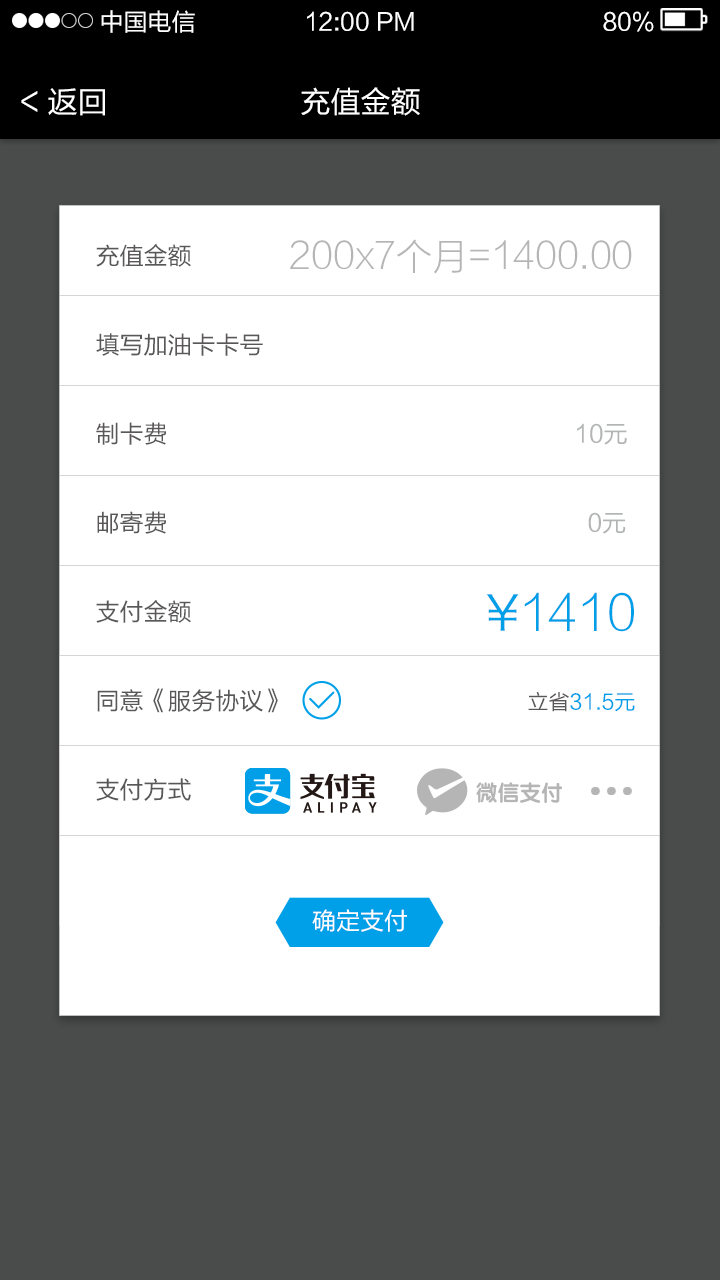
<style>
.page{position:relative;width:720px;height:1280px;background:#ffffff}
.page>*{position:absolute;margin:0}
.t1{font:24px "FZLTHK--GBK1-0";color:#ffffff}
.t2{font:30px "FZLTHK--GBK1-0";color:#ffffff}
.t3{font:24px/89px "FZLTHK--GBK1-0";color:#595757}
.t4{font:24px/89px "FZLTHK--GBK1-0";color:#b2b5b4}
.t5{font:21px/89px "FZLTHK--GBK1-0";color:#595757}
.t6{font:21px/89px "FZLTHK--GBK1-0";color:#00a0e9}
.t7{font:36px "FZLTXHJW--GB1-0";color:#b5b5b6}
.t8{font:48px "FZLTXHJW--GB1-0";color:#009fe8}
.t9{font:48px "HiraginoSansGB-W3";color:#009fe8}
</style>
<div class="page">
<p class="t1" style="left:101px;top:10px;width:94px;height:23px">中国电信</p>
<p class="t1" style="left:307px;top:11px;width:107px;height:20px">12:00 PM</p>
<p class="t1" style="left:603px;top:11px;width:51px;height:21px">80%</p>
<p class="t2" style="left:21px;top:88px;width:84px;height:28px">&lt; 返回</p>
<p class="t2" style="left:301px;top:87px;width:119px;height:29px">充值金额</p>
<p class="t3" style="left:96px;top:244px;width:539px;height:557px">充值金额     <br>填写加油卡卡号<br>制卡费                 <span class="t4">10元<br></span>邮寄费                   <span class="t4">0元<br></span>支付金额         <br>同意《服务协议》       <span class="t5">立省</span><span class="t6">31.5元<br></span>支付方式</p>
<p class="t7" style="left:290px;top:239px;width:342px;height:35px">200x7个月=1400.00</p>
<p class="t8" style="left:486px;top:592px;width:148px;height:40px"><span class="t9">¥</span>1410</p>
<p class="t1" style="left:312px;top:909px;width:95px;height:23px">确定支付</p>
</div>
